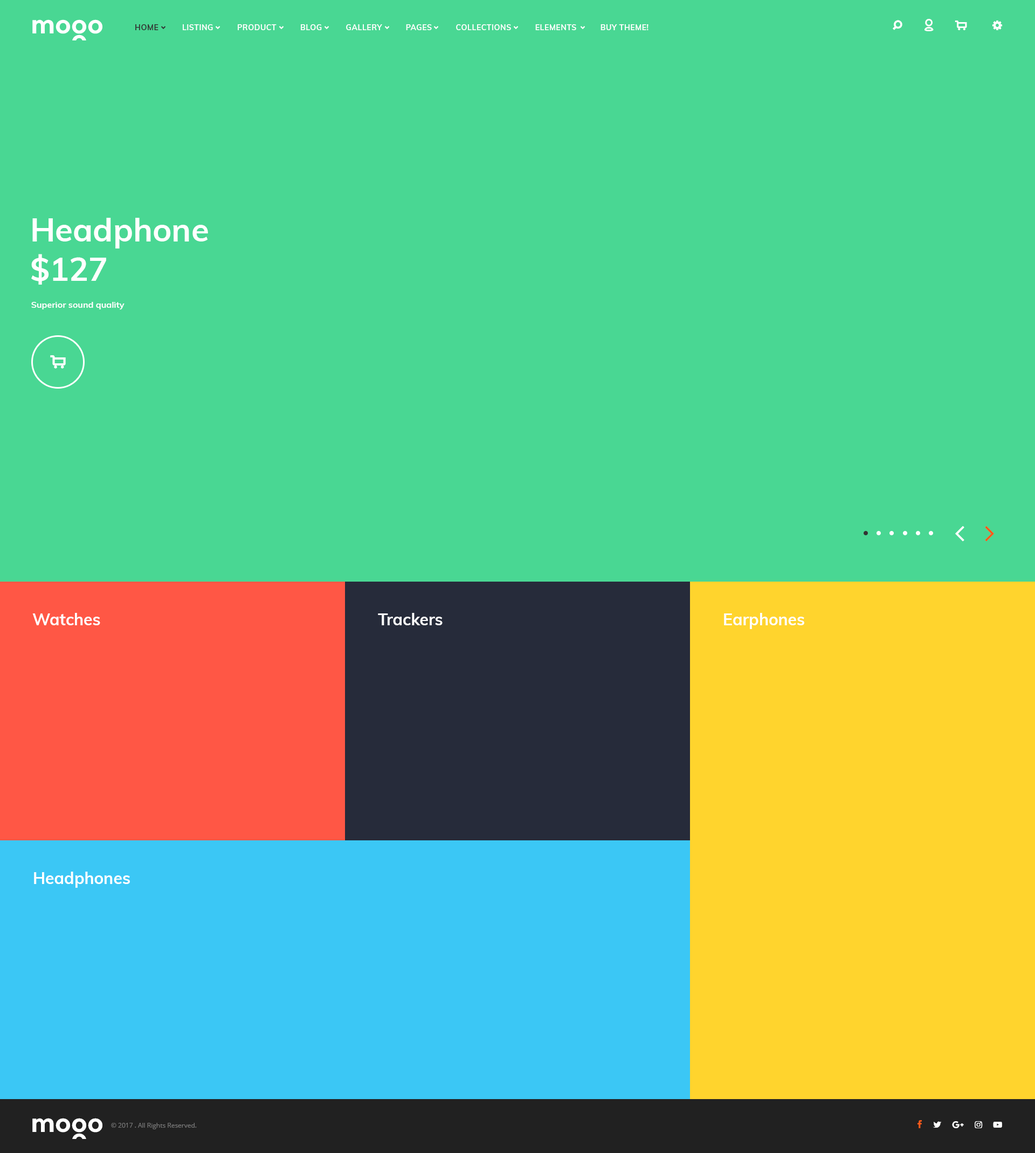
<style>
.page{position:relative;width:1035px;height:1153px;background:#49d793}
.page>*{position:absolute;margin:0}
.t1{font:7.5px "Muli-Bold";letter-spacing:0.04em;color:#333333;text-transform:uppercase}
.t2{font:7.5px "Muli-Bold";letter-spacing:0.04em;color:#ffffff;text-transform:uppercase}
.t3{font:32.3px/39.3px "Muli-Bold";color:#ffffff}
.t4{font:8.6px "Muli-Bold";color:#ffffff}
.t5{font:16.2px "Muli-Bold";color:#ffffff}
.t6{font:24.8px "Montserrat-Bold";color:#ffffff}
.t7{font:6.5px "OpenSans";color:#777777}
</style>
<div class="page">
<p class="t1" style="left:135px;top:24px;width:23px;height:6px">hOME</p>
<p class="t2" style="left:183px;top:24px;width:465px;height:6px">lISTING          pRODUCT          bLOG          gALLERY          pAGES          Collections          elements          BUY THEME!</p>
<p class="t3" style="left:31px;top:218px;width:177px;height:67px">Headphone<br>$127</p>
<p class="t4" style="left:31px;top:302px;width:93px;height:8px">Superior sound quality</p>
<p class="t5" style="left:32px;top:613px;width:68px;height:12px">Watches</p>
<p class="t5" style="left:378px;top:613px;width:64px;height:12px">Trackers</p>
<p class="t5" style="left:724px;top:613px;width:80px;height:16px">Earphones</p>
<p class="t5" style="left:34px;top:871px;width:96px;height:16px">Headphones</p>
<p class="t6" style="left:32px;top:1118px;width:70px;height:14px">mooo</p>
<p class="t7" style="left:111px;top:1122px;width:86px;height:7px">© 2017 . All Rights Reserved.</p>
</div>
